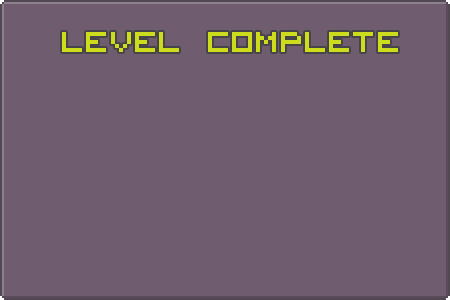
<style>
.page{position:relative;width:450px;height:300px;background:#6f5d6f}
.page>*{position:absolute;margin:0}
.t1{font:52px "VisitorTT2BRK";color:#cddd1d}
</style>
<div class="page">
<p class="t1" style="left:62px;top:32px;width:336px;height:20px">LEVEL COMPLETE</p>
</div>
